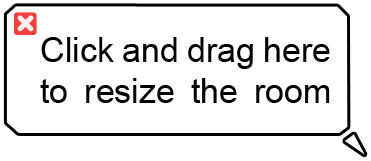
<style>
.page{position:relative;width:371px;height:161px;background:#ffffff}
.page>*{position:absolute;margin:0}
.t1{font:34px "ArialMT";color:#000000}
</style>
<div class="page">
<p class="t1" style="left:40px;top:37px;width:290px;height:66px;text-align:justify">Click and drag here <br>to resize the room</p>
</div>
